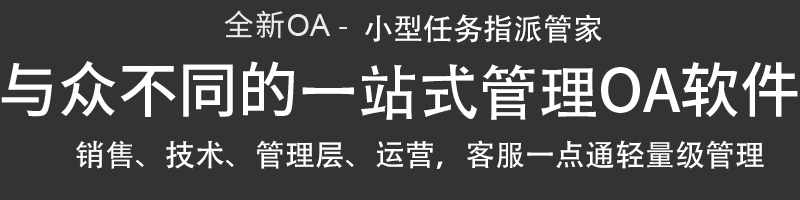
<style>
.page{position:relative;width:800px;height:200px;background:#333333}
.page>*{position:absolute;margin:0}
.t1{font:30px "AdobeHeitiStd-Regular";color:#ffffff}
.t2{font:60px "AdobeHeitiStd-Regular";color:#ffffff}
</style>
<div class="page">
<p class="t1" style="left:365px;top:14px;width:237px;height:29px">小型任务指派管家</p>
<p class="t2" style="left:302px;top:64px;width:294px;height:56px">一站式管理</p>
<p class="t1" style="left:76px;top:140px;width:688px;height:29px">销售、技术、管理层、运营，客服一点通轻量级管理</p>
</div>
